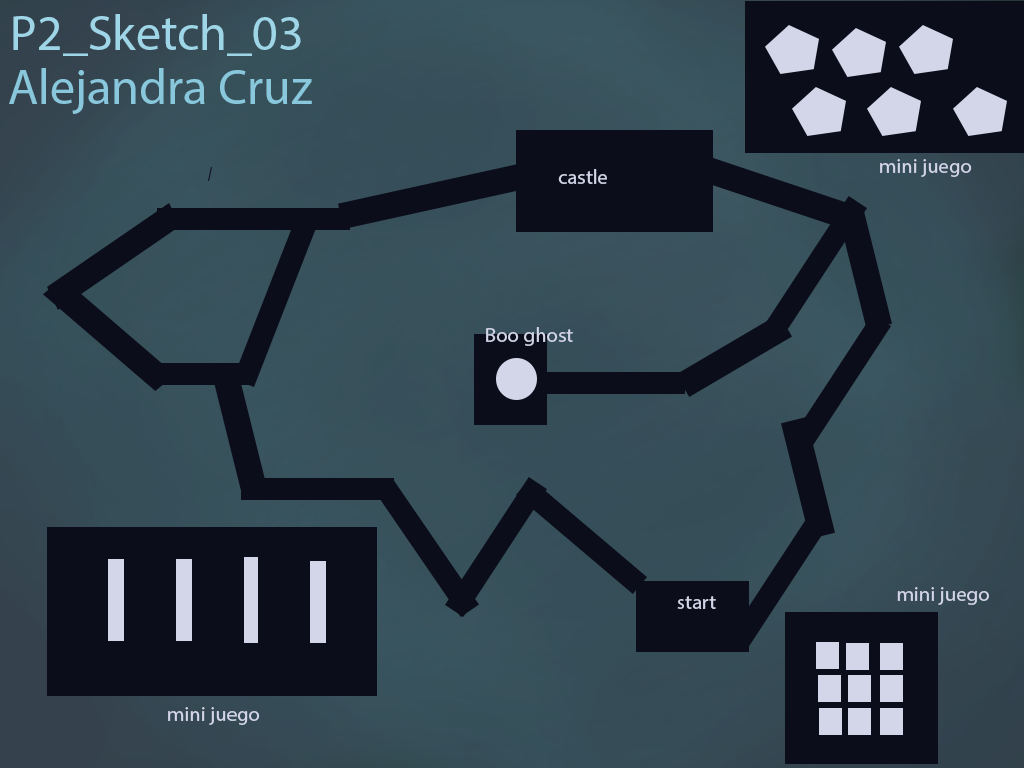
<style>
.page{position:relative;width:1024px;height:768px;background:#0b0d1a}
.page>*{position:absolute;margin:0}
.t1{font:50px "MyriadPro-Regular";color:#9ed6e8}
.t2{font:12px "MyriadPro-Regular";color:#89c8dc}
.t3{font:20.8px "MyriadPro-Regular";color:#d3d6e9}
</style>
<div class="page">
<p class="t1" style="left:13px;top:14px;width:288px;height:42px">P2_Sketch_03</p>
<p class="t2" style="left:9px;top:68px;width:303px;height:46px">Alejandra Cruz</p>
<p class="t3" style="left:880px;top:159px;width:92px;height:18px">mini juego</p>
<p class="t3" style="left:558px;top:169px;width:49px;height:15px">castle</p>
<p class="t3" style="left:486px;top:327px;width:87px;height:19px">Boo ghost</p>
<p class="t3" style="left:897px;top:587px;width:92px;height:18px">mini juego</p>
<p class="t3" style="left:677px;top:596px;width:39px;height:13px">start</p>
<p class="t3" style="left:168px;top:707px;width:92px;height:18px">mini juego</p>
</div>
